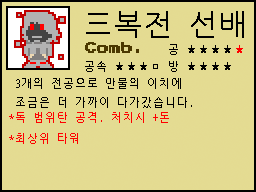
<style>
.page{position:relative;width:256px;height:192px;background:#e4db92}
.page>*{position:absolute;margin:0}
.t1{font:30px "NanumGothicCoding";color:#000000}
.t2{font:30px "Gulim";color:#000000}
.t3{font:12px "PressStart2P";color:#4b3800}
.t4{font:11px "NanumGothicCoding";color:#000000}
.t5{font:11px "NanumGothicCoding";color:#ff0000}
</style>
<div class="page">
<p class="t1" style="left:86px;top:11px;width:158px;height:27px"><span class="t2">三</span>복전 선배</p>
<p class="t3" style="left:85px;top:42px;width:54px;height:11px">Comb.</p>
<p class="t4" style="left:169px;top:44px;width:74px;height:11px">공 ★★★★<span class="t5">★</span></p>
<p class="t4" style="left:85px;top:61px;width:146px;height:11px">공속 ★★★ㅁ 방 ★★★★</p>
<p class="t4" style="left:16px;top:78px;width:176px;height:30px">3개의 전공으로 만물의 이치에<br>조금은 더 가까이 다가갔습니다.</p>
<p class="t5" style="left:9px;top:112px;width:160px;height:11px">*독 범위탄 공격. 처치시 +돈</p>
<p class="t5" style="left:9px;top:133px;width:69px;height:11px">*최상위 타워</p>
</div>
